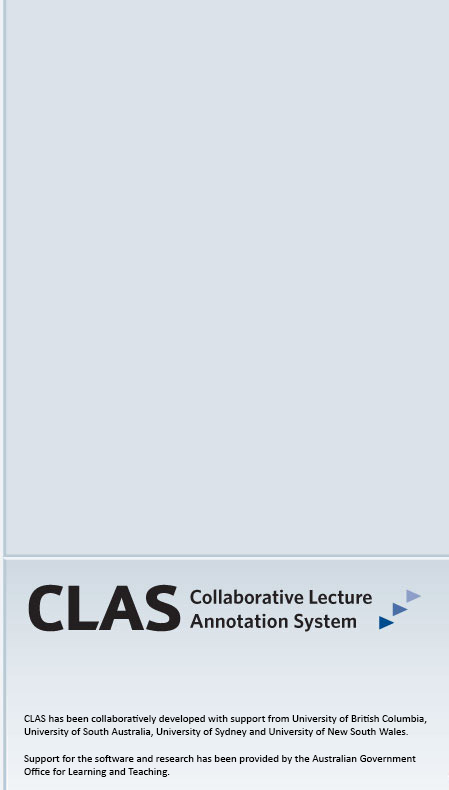
<style>
.page{position:relative;width:449px;height:790px;background:#dbe2ea}
.page>*{position:absolute;margin:0}
.t1{font:11px "Calibri";color:#000000}
</style>
<div class="page">
<p class="t1" style="left:24px;top:715px;width:403px;height:62px">CLAS has been collaboratively developed with support from University of British Columbia, <br>University of South Australia, University of Sydney and University of New South Wales.<br><br>Support for the software and research has been provided by the Australian Government <br>Office for Learning and Teaching.</p>
</div>
